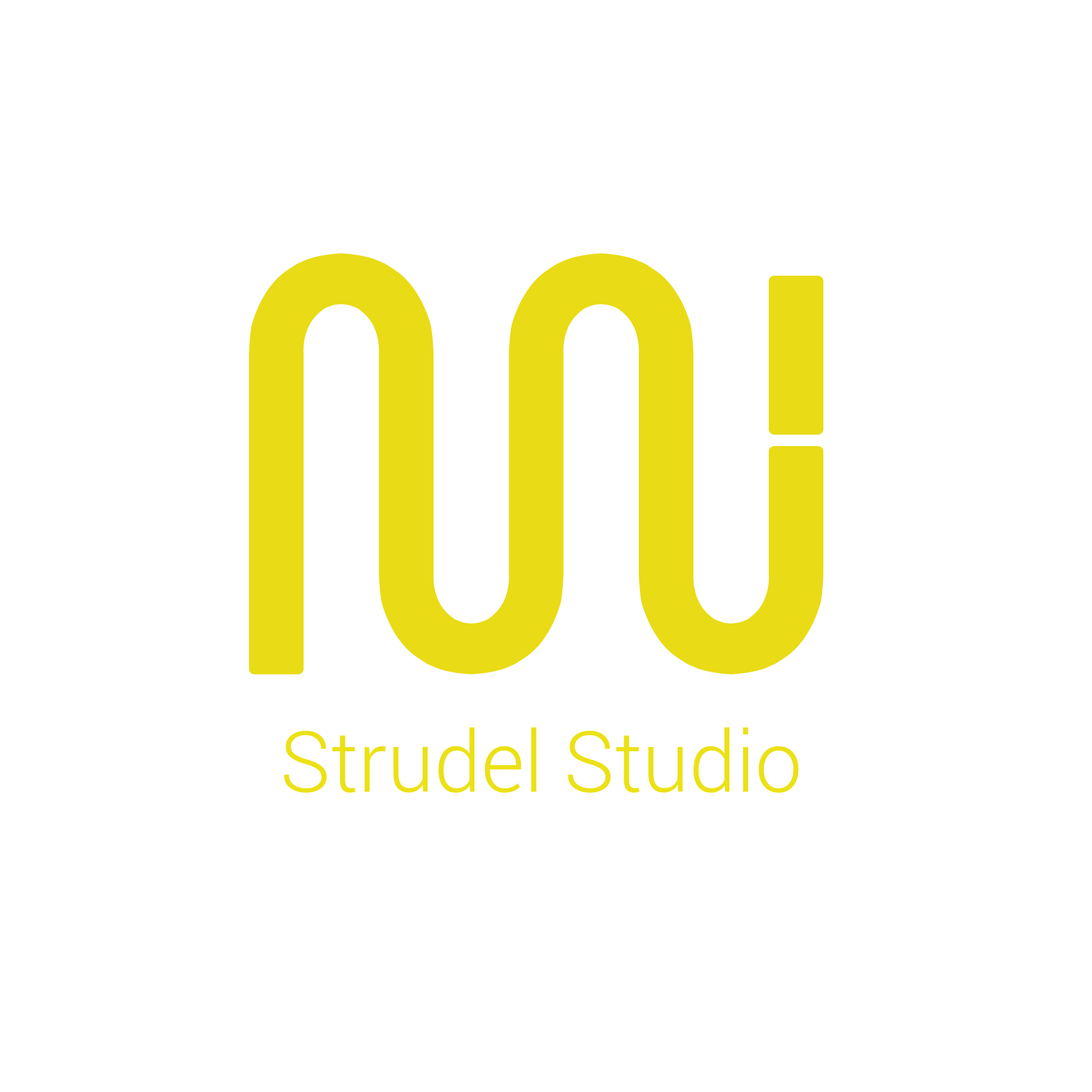
<style>
.page{position:relative;width:1092px;height:1092px;background:#ffffff}
.page>*{position:absolute;margin:0}
.t1{font:84.3px "Roboto-Light";color:#ece116}
</style>
<div class="page">
<p class="t1" style="left:284px;top:727px;width:515px;height:66px">Strudel Studio</p>
</div>
